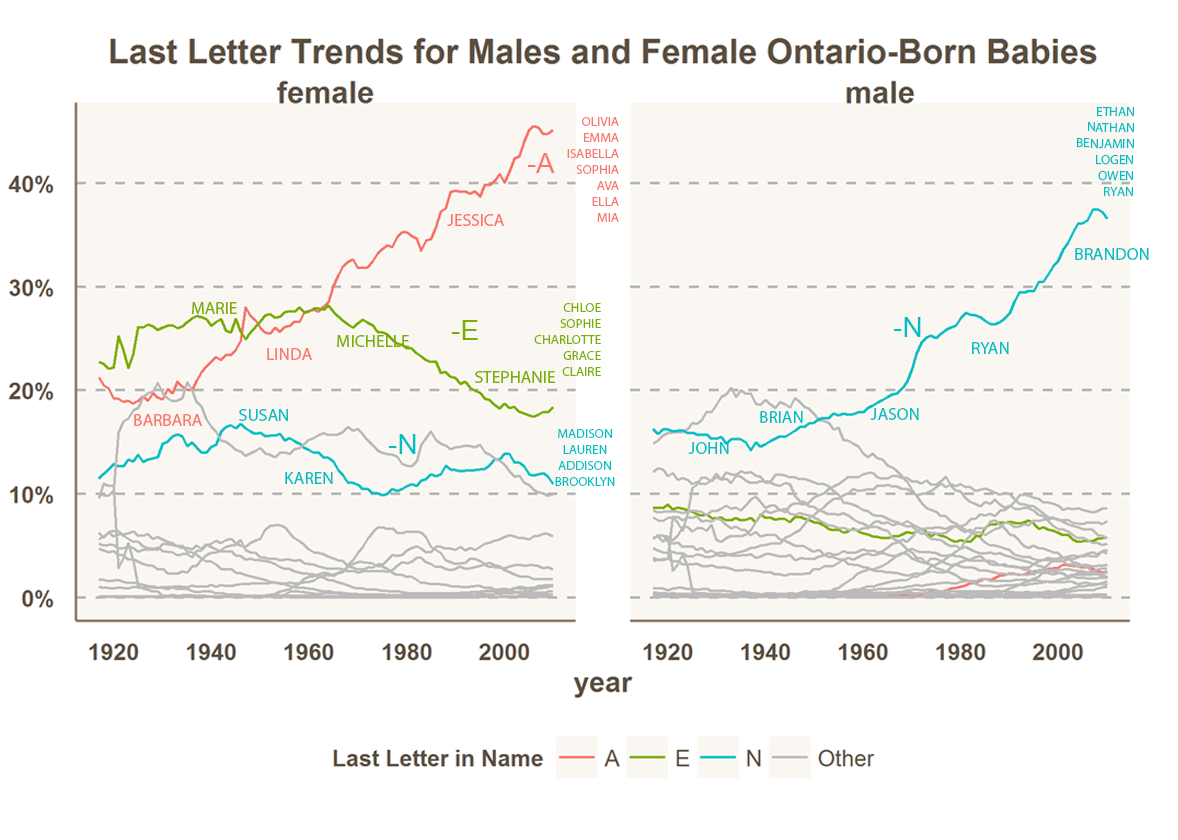
<style>
.page{position:relative;width:1178px;height:840px;background:#ffffff}
.page>*{position:absolute;margin:0}
.t1{font:13.3px "MyriadPro-Regular";color:#00bfc4;text-transform:uppercase}
.t2{font:13.3px "MyriadPro-Regular";color:#f8766d;text-transform:uppercase}
.t3{font:28px "ArialMT";color:#f8766d}
.t4{font:17.3px "MyriadPro-Regular";color:#f8766d;text-transform:uppercase}
.t5{font:17.3px "MyriadPro-Regular";color:#00bfc4;text-transform:uppercase}
.t6{font:17.3px "MyriadPro-Regular";color:#7cae00}
.t7{font:13.3px "MyriadPro-Regular";color:#7cae00;text-transform:uppercase}
.t8{font:28px "ArialMT";color:#00bfc4}
.t9{font:28px "ArialMT";color:#7cae00}
.t10{font:17.3px "MyriadPro-Regular";color:#7cae00;text-transform:uppercase}
.t11{font:17.3px "MyriadPro-Regular";color:#00bfc4}
.t12{font:13.3px "MyriadPro-Regular";color:#00bfc4}
</style>
<div class="page">
<p class="t1" style="left:1076px;top:106px;width:58px;height:91px;text-align:right;rotate:1deg">ethan<br>nathan<br>benjamin<br>logen<br>owen<br>ryan</p>
<p class="t2" style="left:567px;top:117px;width:52px;height:105px;text-align:right">olivia<br>EMMA<br>ISABELLA<br>SOPHIA<br>AVA<br>ELLA<br>MIA</p>
<p class="t3" style="left:527px;top:153px;width:28px;height:20px">-A</p>
<p class="t4" style="left:447px;top:214px;width:57px;height:12px">Jessica</p>
<p class="t5" style="left:1075px;top:248px;width:74px;height:12px">brandon</p>
<p class="t6" style="left:191px;top:302px;width:46px;height:12px">MARIE</p>
<p class="t7" style="left:534px;top:303px;width:67px;height:73px;text-align:right">CHLOE<br>SOPHIE<br>CHARLOTTE<br>GRACE<br>CLAIRE</p>
<p class="t8" style="left:893px;top:317px;width:28px;height:20px">-N</p>
<p class="t9" style="left:451px;top:320px;width:27px;height:20px">-E</p>
<p class="t10" style="left:337px;top:335px;width:72px;height:12px">MICHELLE</p>
<p class="t5" style="left:972px;top:342px;width:37px;height:12px">ryan</p>
<p class="t4" style="left:267px;top:348px;width:45px;height:12px">Linda</p>
<p class="t10" style="left:475px;top:371px;width:80px;height:12px">STEPHANIE</p>
<p class="t4" style="left:134px;top:414px;width:68px;height:12px">Barbara</p>
<p class="t11" style="left:239px;top:409px;width:49px;height:12px">SUSAN</p>
<p class="t5" style="left:760px;top:411px;width:43px;height:12px">brian</p>
<p class="t5" style="left:870px;top:408px;width:49px;height:12px">jason</p>
<p class="t8" style="left:388px;top:434px;width:28px;height:20px">-N</p>
<p class="t12" style="left:555px;top:429px;width:60px;height:57px;text-align:center">MADISON<br>LAUREN<br>ADDISON<br>BROOKLYN</p>
<p class="t5" style="left:688px;top:442px;width:41px;height:12px">john</p>
<p class="t11" style="left:285px;top:472px;width:48px;height:12px">KAREN</p>
</div>
